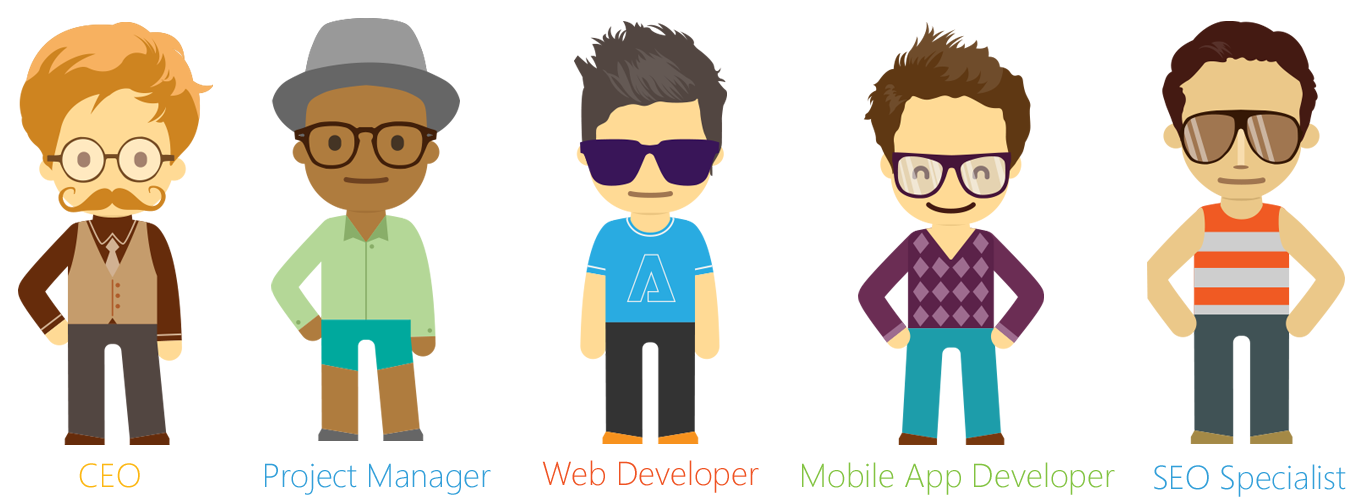
<style>
.page{position:relative;width:1366px;height:500px;background:#ffffff}
.page>*{position:absolute;margin:0}
.t1{font:33.3px "SegoeUI-Light";color:#ef5323}
.t2{font:33.3px "SegoeUI-Light";color:#82c341}
.t3{font:33.3px "SegoeUI-Light";color:#fcb713}
.t4{font:33.3px "SegoeUI-Light";color:#329fd9}
</style>
<div class="page">
<p class="t1" style="left:542px;top:460px;width:217px;height:33px">Web Developer</p>
<p class="t2" style="left:802px;top:462px;width:313px;height:33px">Mobile App Developer</p>
<p class="t3" style="left:79px;top:463px;width:61px;height:25px">CEO</p>
<p class="t4" style="left:265px;top:463px;width:226px;height:32px">Project Manager</p>
<p class="t4" style="left:1154px;top:464px;width:192px;height:33px">SEO Specialist</p>
</div>
